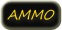
<style>
.page{position:relative;width:62px;height:30px}
.page>*{position:absolute;margin:0}
.t1{font:13.3px "SegoePrint";color:#ffd905;font-style:italic}
</style>
<div class="page">
<p class="t1" style="left:7px;top:9px;width:48px;height:11px">AMMO</p>
</div>
